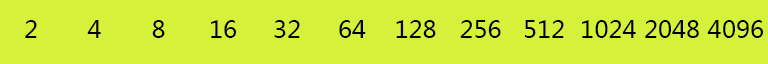
<style>
.page{position:relative;width:768px;height:64px;background:#d5f13a}
.page>*{position:absolute;margin:0}
.t1{font:24px "MicrosoftYaHei";color:#000000}
</style>
<div class="page">
<p class="t1" style="left:25px;top:20px;width:12px;height:18px">2</p>
<p class="t1" style="left:87px;top:20px;width:14px;height:18px">4</p>
<p class="t1" style="left:152px;top:20px;width:13px;height:18px">8</p>
<p class="t1" style="left:211px;top:20px;width:25px;height:18px">16</p>
<p class="t1" style="left:274px;top:20px;width:26px;height:18px">32</p>
<p class="t1" style="left:339px;top:20px;width:27px;height:18px">64</p>
<p class="t1" style="left:396px;top:20px;width:40px;height:18px">128</p>
<p class="t1" style="left:460px;top:20px;width:41px;height:18px">256</p>
<p class="t1" style="left:525px;top:20px;width:39px;height:18px">512</p>
<p class="t1" style="left:582px;top:20px;width:54px;height:18px">1024</p>
<p class="t1" style="left:645px;top:20px;width:54px;height:18px">2048</p>
<p class="t1" style="left:707px;top:20px;width:56px;height:18px">4096</p>
</div>
